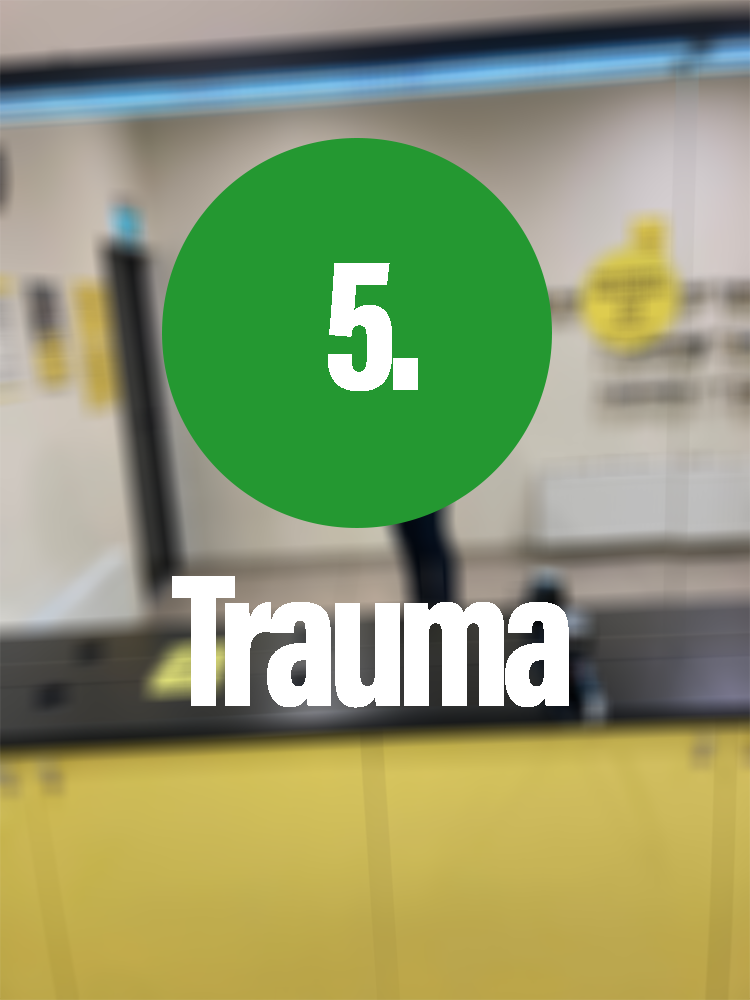
<style>
.page{position:relative;width:750px;height:1000px}
.page>*{position:absolute;margin:0}
.t1{font:195.3px "AcuminConcept-ExtraCondensedBlack";letter-spacing:-0.05em;color:#ffffff}
</style>
<div class="page">
<p class="t1" style="left:328px;top:263px;width:90px;height:128px">5.</p>
<p class="t1" style="left:172px;top:576px;width:397px;height:132px">Trauma</p>
</div>
